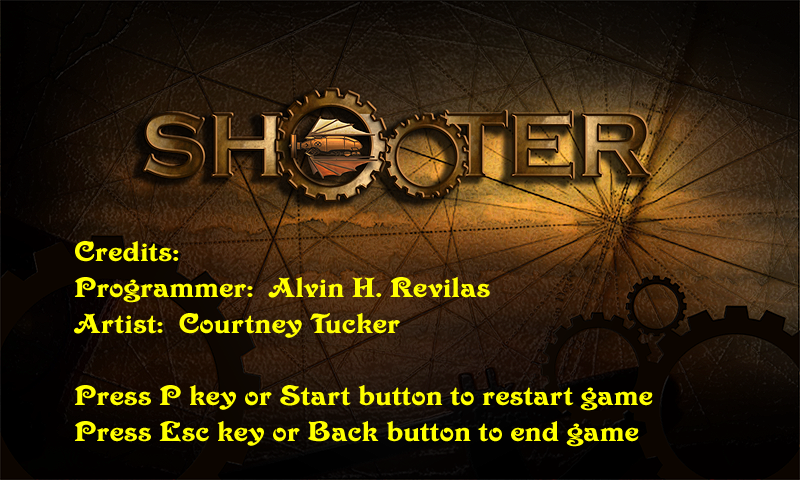
<style>
.page{position:relative;width:800px;height:480px}
.page>*{position:absolute;margin:0}
.t1{font:30px "VictorianStd";color:#ffff00;scale:1.25 1}
</style>
<div class="page">
<p class="t1" style="left:74px;top:241px;width:579px;height:206px">Credits:  <br>Programmer:  Alvin H. Revilas<br>Artist:  Courtney Tucker<br><br>Press P key or Start button to restart game<br>Press Esc key or Back button to end game</p>
</div>
